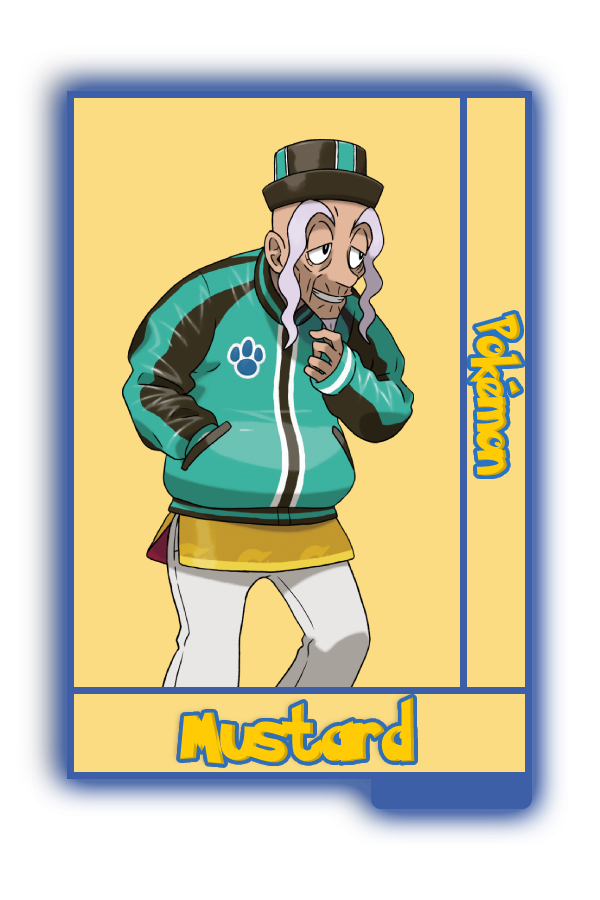
<style>
.page{position:relative;width:600px;height:900px;background:#fbdc83}
.page>*{position:absolute;margin:0}
.t1{font:48.8px "PokemonSolidNormal";color:#ffcb05;scale:0.8 1}
.t2{font:60.1px "PokemonSolidNormal";color:#ffcb05;scale:0.96 1}
</style>
<div class="page">
<p class="t1" style="left:469px;top:313px;width:54px;height:163px;rotate:90deg">Pokémon</p>
<p class="t2" style="left:180px;top:697px;width:235px;height:68px">Mustard</p>
</div>
